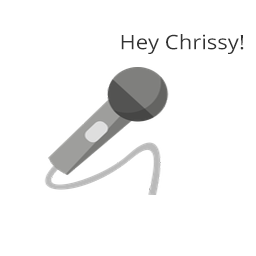
<style>
.page{position:relative;width:256px;height:256px;background:#ffffff}
.page>*{position:absolute;margin:0}
.t1{font:20px "OpenSans";color:#333333;scale:1.1 1}
</style>
<div class="page">
<p class="t1" style="left:121px;top:34px;width:118px;height:20px">Hey Chrissy</p>
<p class="t1" style="left:240px;top:35px;width:4px;height:15px">!</p>
</div>
